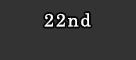
<style>
.page{position:relative;width:136px;height:60px;background:#333333}
.page>*{position:absolute;margin:0}
.t1{font:18px "Century";letter-spacing:0.1em;color:#ffffff}
</style>
<div class="page">
<p class="t1" style="left:44px;top:13px;width:47px;height:14px">22nd</p>
</div>
